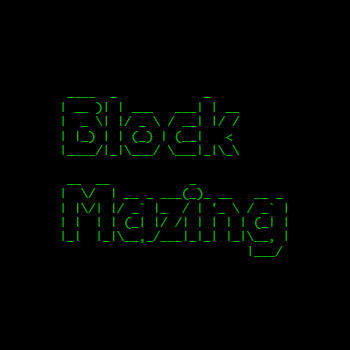
<style>
.page{position:relative;width:350px;height:350px;background:#000000}
.page>*{position:absolute;margin:0}
.t1{font:12px "Monaco";color:#00aa00}
</style>
<div class="page">
<p class="t1" style="left:62px;top:97px;width:225px;height:160px">____  _            _<br>| __ )| | ___   ___| | __<br>|  _ \| |/ _ \ / __| |/ /<br>| |_) | | (_) | (__|   &lt;<br>|____/|_|\___/ \___|_|\_\<br><br> __  __           _<br>|  \/  | __ _ ___(_)_ __   __ _<br>| |\/| |/ _` |_  / | '_ \ / _` |<br>| |  | | (_| |/ /| | | | | (_| |<br>|_|  |_|\__,_/___|_|_| |_|\__, |<br>                          |___/</p>
</div>
